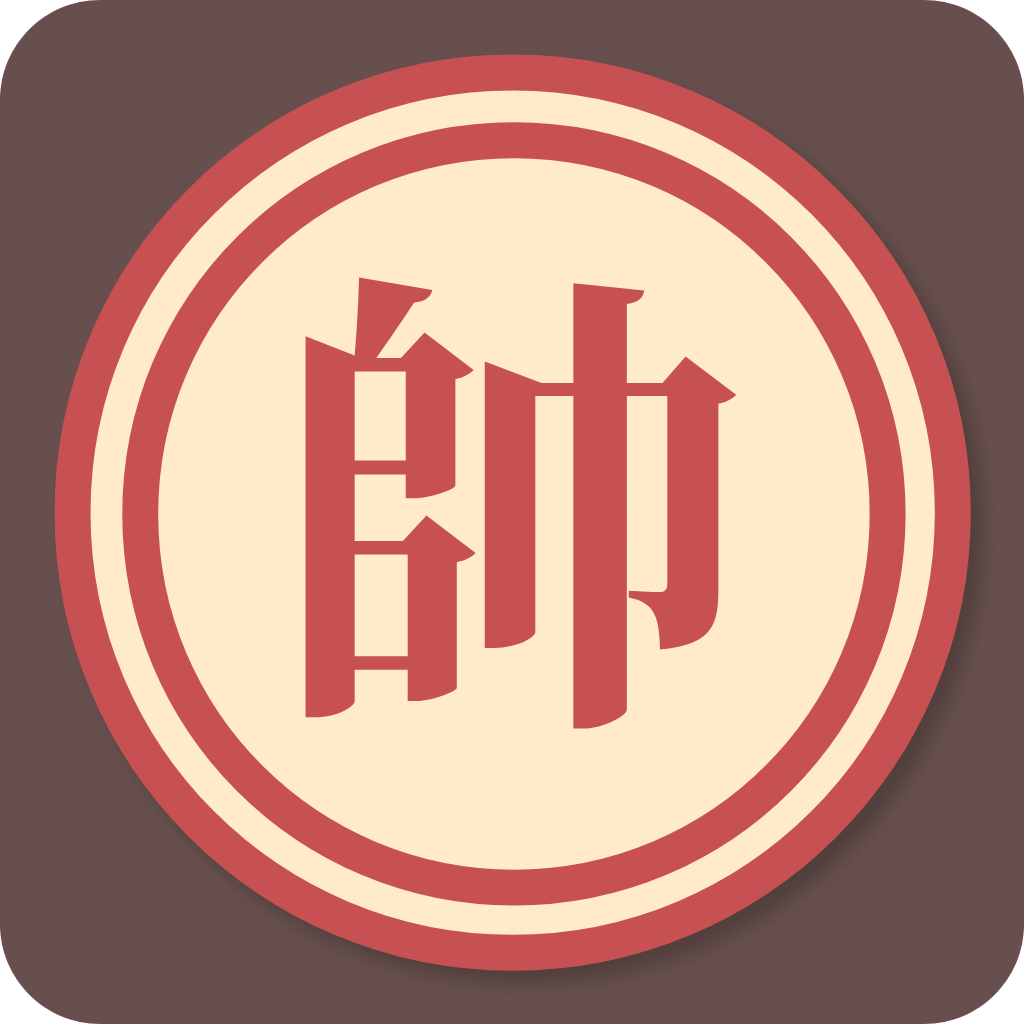
<style>
.page{position:relative;width:1024px;height:1024px;background:#ffeac9}
.page>*{position:absolute;margin:0}
.t1{font:481.7px "SourceHanSerifTC-Bold";color:#c75152}
</style>
<div class="page">
<p class="t1" style="left:305px;top:277px;width:431px;height:452px">帥</p>
</div>
